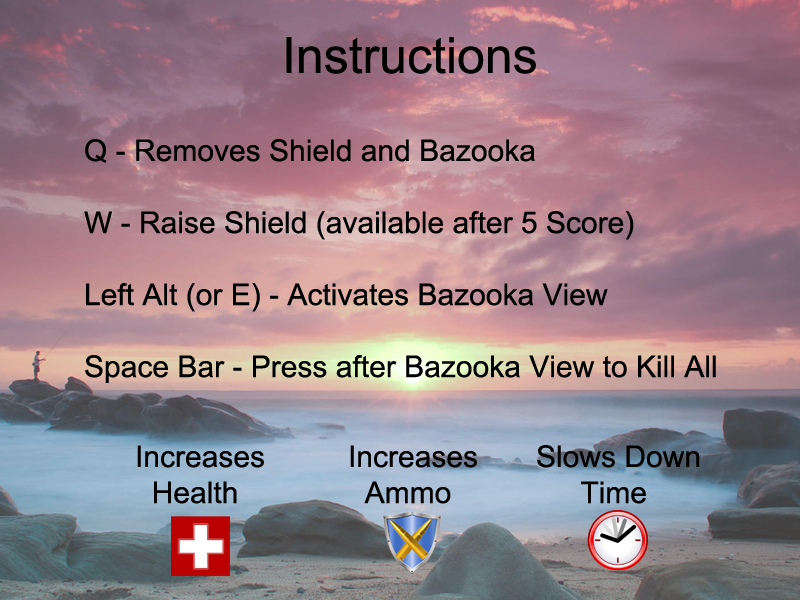
<style>
.page{position:relative;width:800px;height:600px}
.page>*{position:absolute;margin:0}
.t1{font:50px "ArialMT";color:#000000}
.t2{font:30px "ArialMT";color:#000000}
</style>
<div class="page">
<p class="t1" style="left:286px;top:37px;width:250px;height:37px">Instructions</p>
<p class="t2" style="left:84px;top:139px;width:632px;height:244px">Q - Removes Shield and Bazooka<br><br>W - Raise Shield (available after 5 Score)<br><br>Left Alt (or E) - Activates Bazooka View<br><br>Space Bar - Press after Bazooka View to Kill All</p>
<p class="t2" style="left:137px;top:445px;width:127px;height:59px">Increases<br>  Health</p>
<p class="t2" style="left:350px;top:445px;width:127px;height:59px">Increases<br>  Ammo</p>
<p class="t2" style="left:537px;top:445px;width:163px;height:59px">Slows Down<br>  Time</p>
</div>
